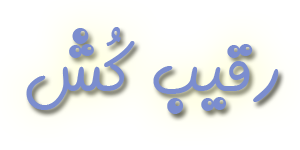
<style>
.page{position:relative;width:300px;height:150px;background:#ffffff}
.page>*{position:absolute;margin:0}
.t1{font:69.3px "BMorvarid";color:#7b8dcf}
</style>
<div class="page">
<p class="t1" style="left:26px;top:27px;width:253px;height:87px">رقیب کُش</p>
</div>
